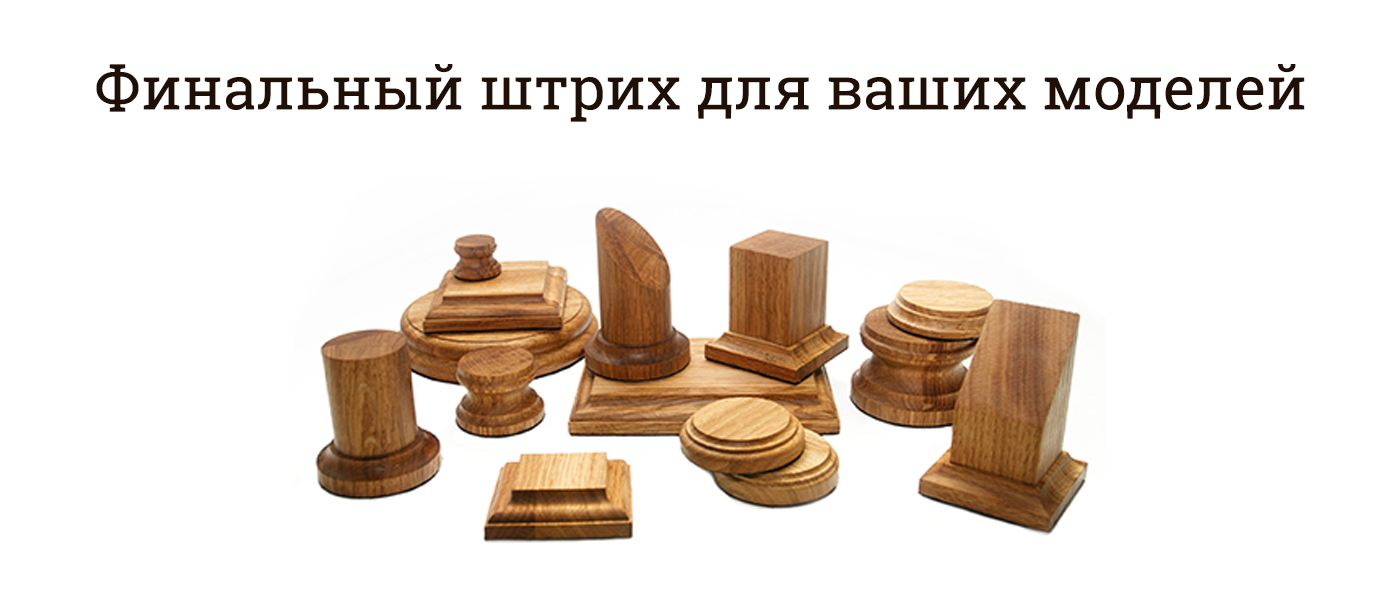
<style>
.page{position:relative;width:1400px;height:600px;background:#ffffff}
.page>*{position:absolute;margin:0}
.t1{font:60px "RobotoSlab-Regular";color:#1f0f05}
</style>
<div class="page">
<p class="t1" style="left:96px;top:64px;width:1209px;height:58px">Финальный штрих для ваших моделей</p>
</div>
